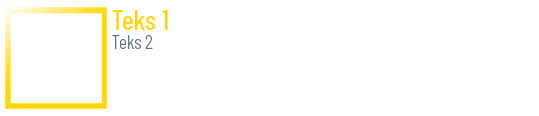
<style>
.page{position:relative;width:539px;height:116px;background:#ffffff}
.page>*{position:absolute;margin:0}
.t1{font:27.9px "BarlowCondensed-Medium";color:#ffd706}
.t2{font:19.3px "BarlowCondensed-Light";color:#5e7783}
</style>
<div class="page">
<p class="t1" style="left:112px;top:10px;width:56px;height:20px">Teks 1</p>
<p class="t2" style="left:112px;top:35px;width:41px;height:14px">Teks 2</p>
</div>
